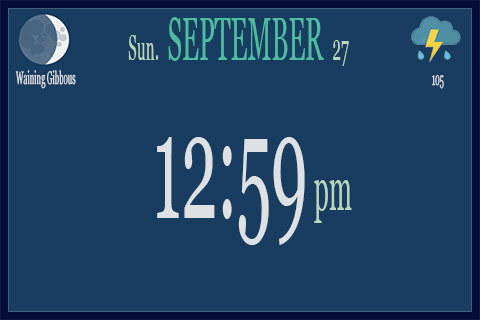
<style>
.page{position:relative;width:480px;height:320px;background:#193d61}
.page>*{position:absolute;margin:0}
.t1{font:60px "Georgia";color:#4ebca1;scale:0.43 1}
.t2{font:36px "Georgia";color:#b9d7bd;scale:0.43 1}
.t3{font:18px "Georgia";color:#dee1e4;scale:0.43 1}
.t4{font:150px "Georgia";color:#dee1e4;scale:0.43 1}
.t5{font:60px "Georgia";color:#b9d7bd;scale:0.43 1}
</style>
<div class="page">
<p class="t1" style="left:168px;top:17px;width:156px;height:44px">SEPTEMBER</p>
<p class="t2" style="left:128px;top:35px;width:31px;height:25px">Sun.</p>
<p class="t2" style="left:333px;top:40px;width:16px;height:26px">27</p>
<p class="t3" style="left:15px;top:70px;width:61px;height:19px">Waining Gibbous</p>
<p class="t3" style="left:432px;top:75px;width:12px;height:14px">105</p>
<p class="t4" style="left:157px;top:137px;width:148px;height:108px">12:59</p>
<p class="t5" style="left:314px;top:180px;width:38px;height:43px">pm</p>
</div>
